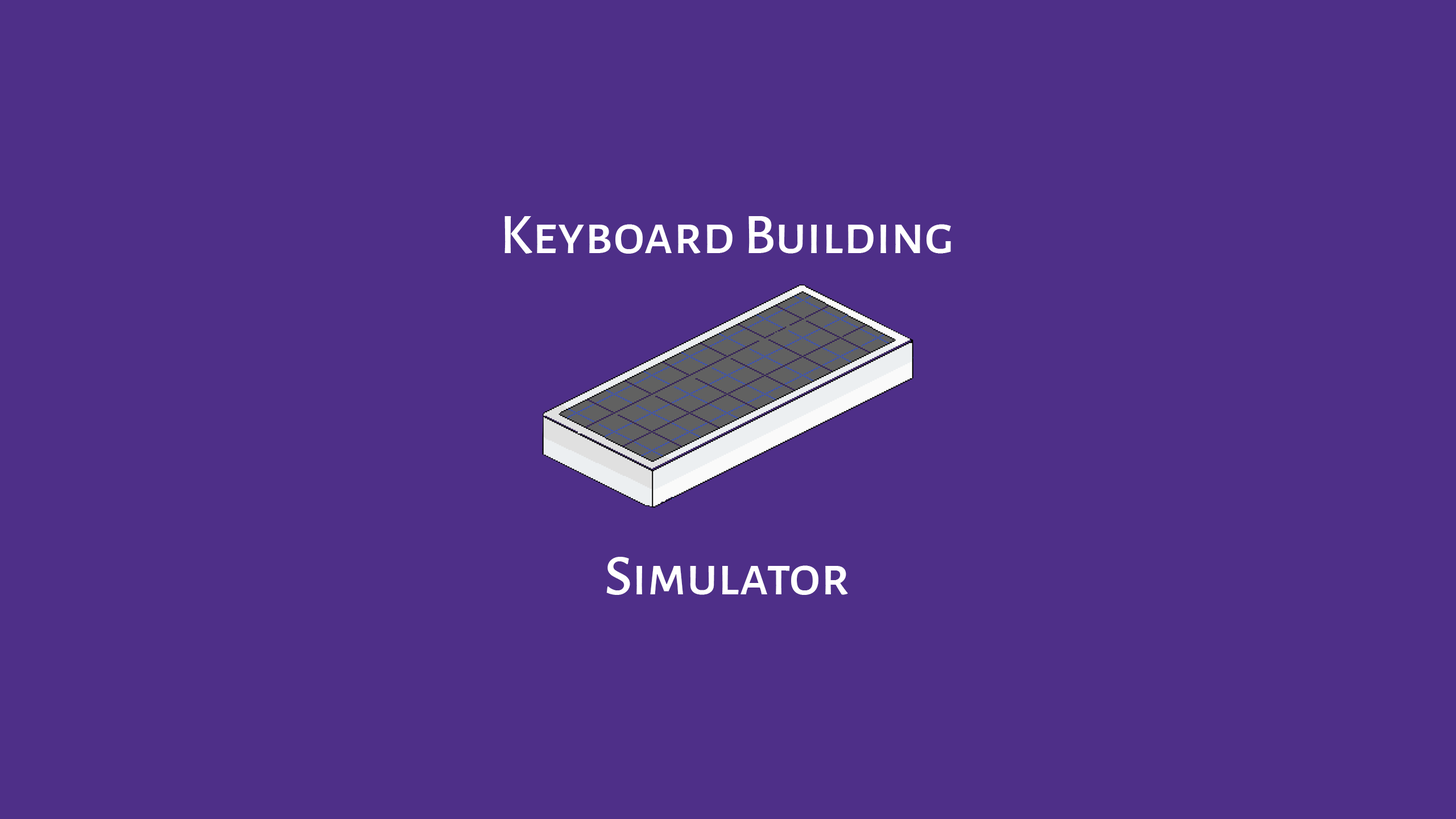
<style>
.page{position:relative;width:1456px;height:819px;background:#4e2f88}
.page>*{position:absolute;margin:0}
.t1{font:56.9px "AlegreyaSansSC-Medium";color:#ffffff}
</style>
<div class="page">
<p class="t1" style="left:504px;top:216px;width:447px;height:379px;text-align:center">Keyboard Building<br><br><br><br><br>Simulator</p>
</div>
